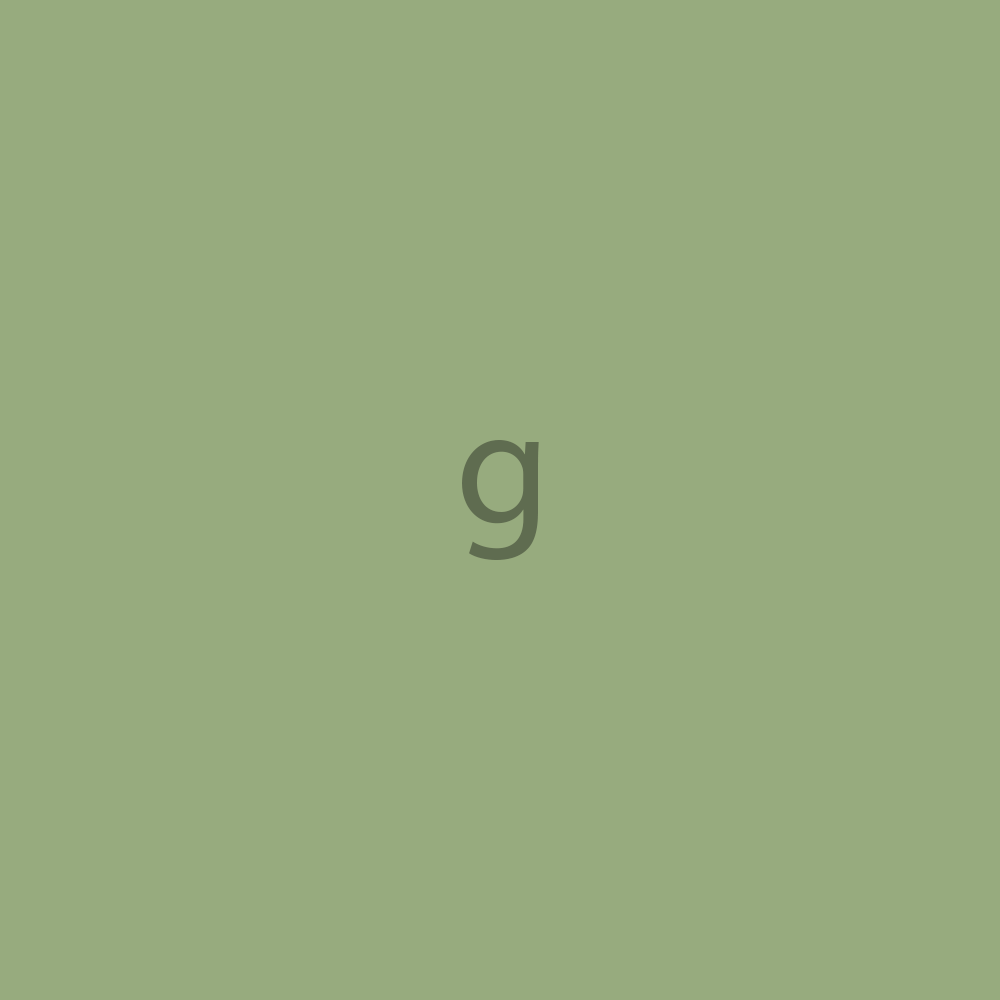
<style>
.page{position:relative;width:1000px;height:1000px;background:#97ab7e}
.page>*{position:absolute;margin:0}
.t1{font:169.3px "MyriadPro-Regular";color:#5f6c50}
</style>
<div class="page">
<p class="t1" style="left:462px;top:440px;width:77px;height:120px">g</p>
</div>
